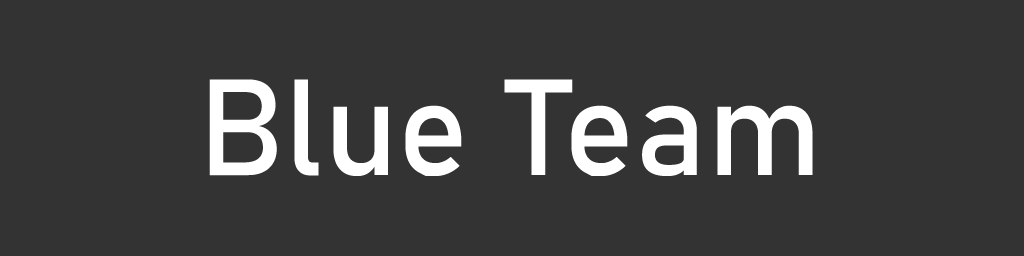
<style>
.page{position:relative;width:1024px;height:256px;background:#333333}
.page>*{position:absolute;margin:0}
.t1{font:134.5px "Bahnschrift";color:#ffffff}
</style>
<div class="page">
<p class="t1" style="left:209px;top:79px;width:604px;height:97px">Blue Team</p>
</div>
